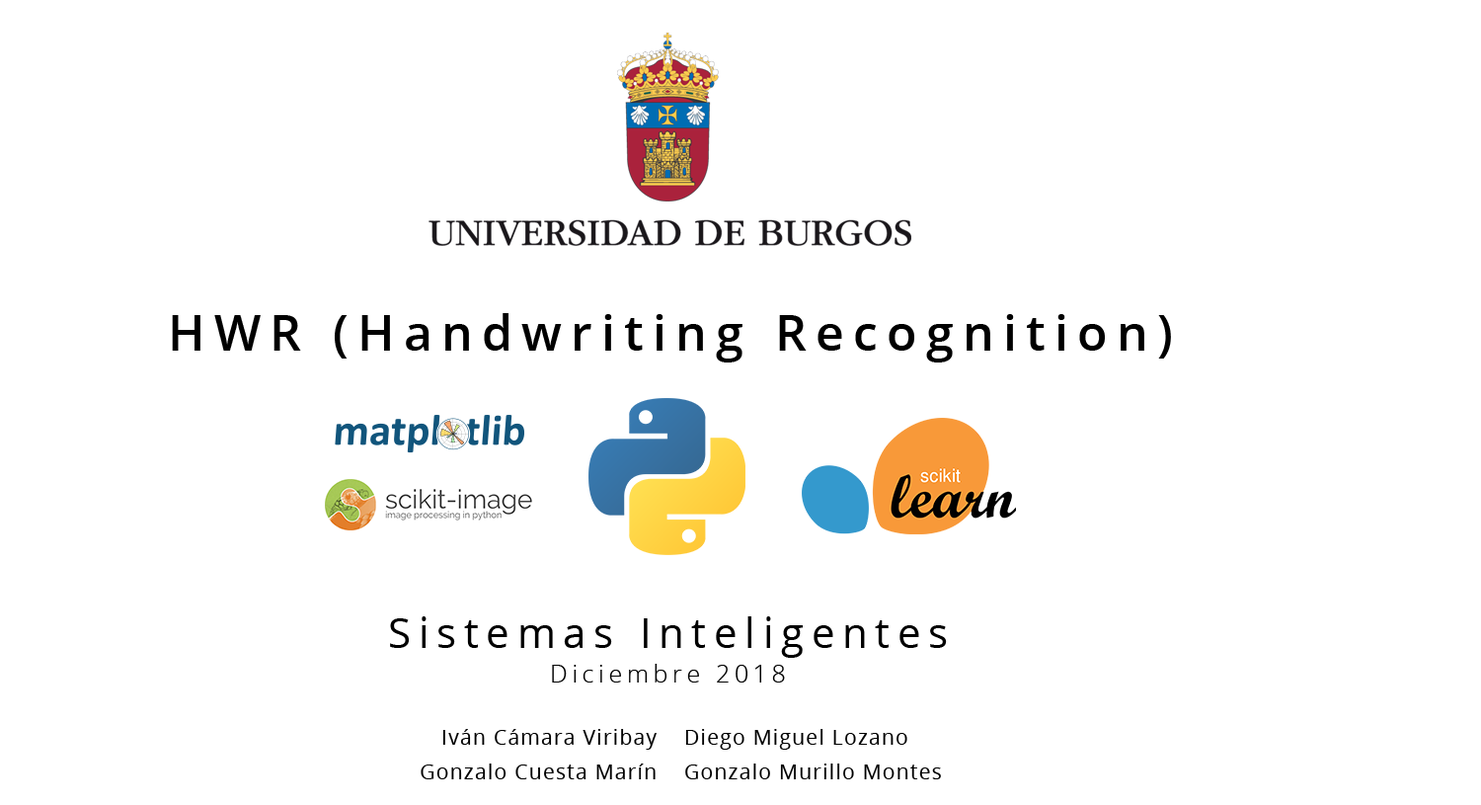
<style>
.page{position:relative;width:1481px;height:805px;background:#ffffff}
.page>*{position:absolute;margin:0}
.t1{font:49.4px "OpenSans-Semibold";letter-spacing:0.185em;color:#000000}
.t2{font:41.3px/33.9px "OpenSans";letter-spacing:0.185em;color:#000000}
.t3{font:24.7px/33.9px "OpenSans-Light";letter-spacing:0.185em;color:#000000}
.t4{font:20.6px/33.9px "OpenSans";letter-spacing:0.065em;color:#000000}
</style>
<div class="page">
<p class="t1" style="left:172px;top:313px;width:999px;height:49px">HWR (Handwriting Recognition)</p>
<p class="t2" style="left:390px;top:616px;width:557px;height:66px;text-align:center">Sistemas Inteligentes<br><span class="t3">Diciembre 2018</span></p>
<p class="t4" style="left:421px;top:729px;width:236px;height:50px;text-align:right">Iván Cámara Viribay<br>Gonzalo Cuesta Marín</p>
<p class="t4" style="left:685px;top:729px;width:256px;height:50px">Diego Miguel Lozano<br>Gonzalo Murillo Montes</p>
</div>
